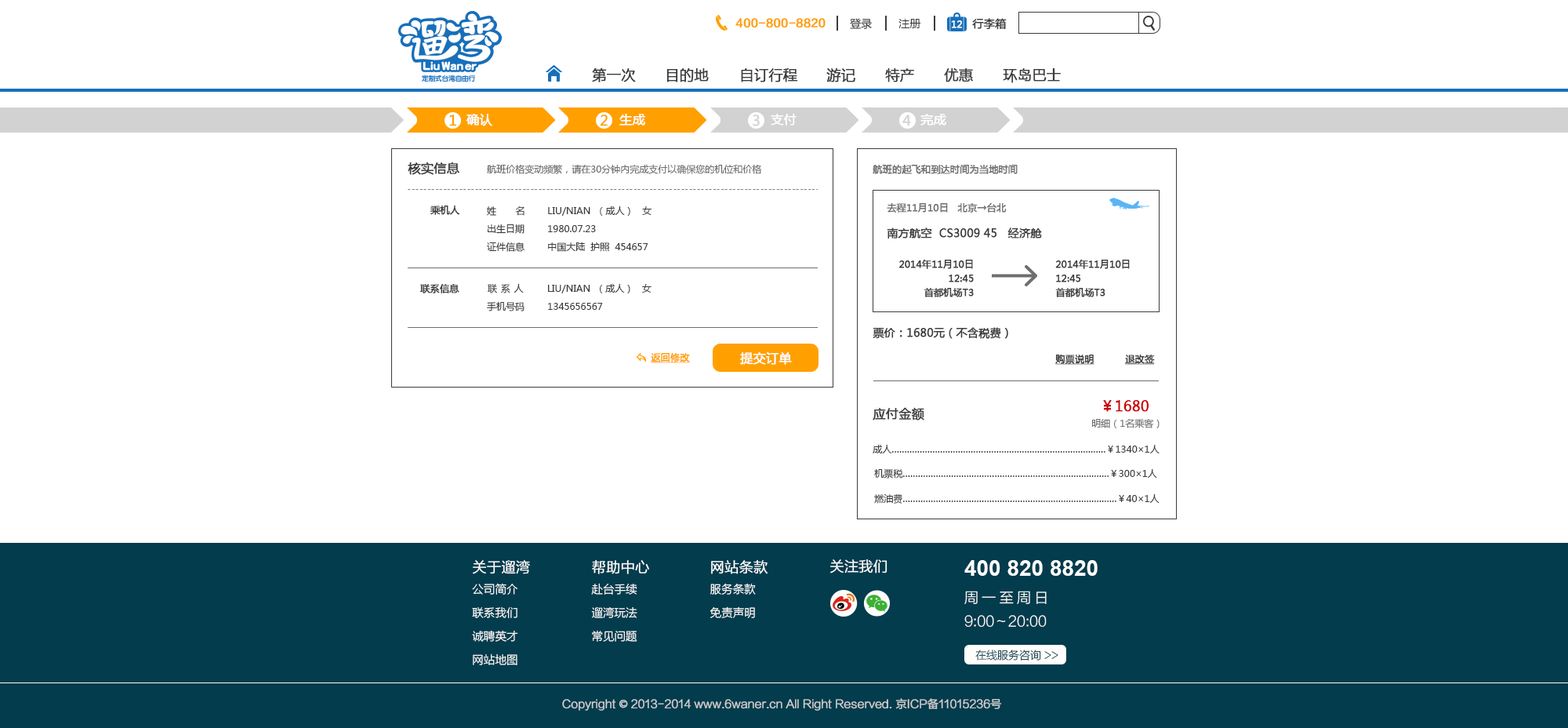
<style>
.page{position:relative;width:1568px;height:728px;background:#ffffff}
.page>*{position:absolute;margin:0}
.t1{font:11px "FZLTZHK--GBK1-0";color:#ffa000;font-weight:bold}
.t2{font:11px "MicrosoftYaHei";color:#3c3c3c}
.t3{font:9.4px "MicrosoftYaHei";color:#fefefe;font-weight:bold}
.t4{font:11px "MicrosoftYaHei";color:#3c3c3c;font-weight:bold}
.t5{font:14.1px "MicrosoftYaHei";color:#3c3c3c;font-weight:bold}
.t6{font:12.5px "MicrosoftYaHei";color:#ffffff;font-weight:bold}
.t7{font:14.1px "MicrosoftYaHei";color:#ffa000;font-weight:bold}
.t8{font:14.1px "MicrosoftYaHei";color:#d2d2d2;font-weight:bold}
.t9{font:12.5px "MicrosoftYaHei";color:#3c3c3c;font-weight:bold}
.t10{font:9.4px "MicrosoftYaHei";color:#6e6e6e}
.t11{font:9.4px "MicrosoftYaHei";color:#6e6e6e;font-weight:bold}
.t12{font:9.4px "MicrosoftYaHei";color:#3c3c3c;font-weight:bold}
.t13{font:9.4px "MicrosoftYaHei";color:#3c3c3c}
.t14{font:9.4px/14.1px "MicrosoftYaHei";color:#3c3c3c;font-weight:bold}
.t15{font:9.4px "MicrosoftYaHei";letter-spacing:0.05em;color:#3c3c3c}
.t16{font:9.4px "MicrosoftYaHei";color:#ffa000;font-weight:bold;text-decoration:underline}
.t17{font:9.4px "MicrosoftYaHei";color:#3c3c3c;font-weight:bold;text-decoration:underline}
.t18{font:14.1px "MicrosoftYaHei";color:#cc0000;font-weight:bold}
.t19{font:11.4px/23.5px "FZLTXHK--GBK1-0";color:#ffffff}
.t20{font:14.1px/23.5px "FZLTXHK--GBK1-0";color:#ffffff;font-weight:bold}
.t21{font:14.1px "FZLTXHK--GBK1-0";color:#ffffff;font-weight:bold}
.t22{font:22px "Arial-BoldMT";color:#ffffff}
.t23{font:14.1px/23.5px "FZLTXHK--GBK1-0";color:#ffffff}
.t24{font:14.1px/23.5px "FZLTXHK--GBK1-0";letter-spacing:0.24em;color:#ffffff}
.t25{font:11px "FZLTXHK--GBK1-0"}
.t26{font:11px "FZLTXHK--GBK1-0";color:#d0d0d0;font-weight:bold}
.t27{font:11px "AdobeHeitiStd-Regular";color:#d0d0d0;font-weight:bold}
</style>
<div class="page">
<p class="t1" style="left:735px;top:18px;width:91px;height:10px">400-800-8820</p>
<p class="t2" style="left:850px;top:18px;width:22px;height:11px">登录</p>
<p class="t2" style="left:898px;top:19px;width:23px;height:9px">注册</p>
<p class="t3" style="left:951px;top:20px;width:11px;height:8px">12</p>
<p class="t4" style="left:972px;top:18px;width:35px;height:12px">行李箱</p>
<p class="t5" style="left:592px;top:67px;width:44px;height:15px">第一次</p>
<p class="t5" style="left:666px;top:68px;width:43px;height:14px">目的地</p>
<p class="t5" style="left:741px;top:68px;width:57px;height:14px">自订行程</p>
<p class="t5" style="left:826px;top:68px;width:29px;height:14px">游记</p>
<p class="t5" style="left:885px;top:68px;width:29px;height:14px">特产</p>
<p class="t5" style="left:944px;top:68px;width:29px;height:14px">优惠</p>
<p class="t5" style="left:1003px;top:68px;width:58px;height:15px">环岛巴士</p>
<p class="t6" style="left:466px;top:114px;width:26px;height:12px">确认</p>
<p class="t6" style="left:619px;top:114px;width:26px;height:11px">生成</p>
<p class="t6" style="left:771px;top:114px;width:26px;height:11px">支付</p>
<p class="t6" style="left:920px;top:114px;width:26px;height:11px">完成</p>
<p class="t7" style="left:449px;top:114px;width:7px;height:12px">1</p>
<p class="t7" style="left:601px;top:114px;width:7px;height:12px">2</p>
<p class="t8" style="left:753px;top:114px;width:7px;height:12px">3</p>
<p class="t8" style="left:902px;top:114px;width:9px;height:12px">4</p>
<p class="t9" style="left:408px;top:162px;width:51px;height:13px">核实信息</p>
<p class="t10" style="left:487px;top:164px;width:274px;height:10px">航班价格变动频繁，请在30分钟内完成支付以确保您的机位和价格</p>
<p class="t11" style="left:873px;top:164px;width:145px;height:10px">航班的起飞和到达时间为当地时间</p>
<p class="t12" style="left:430px;top:205px;width:30px;height:10px">乘机人</p>
<p class="t13" style="left:486px;top:206px;width:166px;height:10px">姓       名        LIU/NIAN  （成人）   女</p>
<p class="t11" style="left:887px;top:202px;width:120px;height:10px">去程11月10日   北京→台北</p>
<p class="t13" style="left:488px;top:223px;width:108px;height:11px">出生日期        1980.07.23</p>
<p class="t4" style="left:887px;top:227px;width:155px;height:12px">南方航空  CS3009 45   经济舱</p>
<p class="t13" style="left:487px;top:242px;width:161px;height:10px">证件信息         中国大陆  护照  454657</p>
<p class="t14" style="left:899px;top:259px;width:75px;height:38px;text-align:right">2014年11月10日<br>12:45<br>首都机场T3</p>
<p class="t14" style="left:1055px;top:259px;width:75px;height:38px">2014年11月10日<br>12:45<br>首都机场T3</p>
<p class="t12" style="left:420px;top:284px;width:39px;height:9px">联系信息</p>
<p class="t13" style="left:487px;top:284px;width:165px;height:9px"><span class="t15">联 系 人         </span>LIU/NIAN  （成人）   女</p>
<p class="t13" style="left:487px;top:302px;width:116px;height:9px">手机号码        1345656567</p>
<p class="t4" style="left:873px;top:327px;width:135px;height:12px">票价：1680元（不含税费）</p>
<p class="t16" style="left:651px;top:352px;width:39px;height:11px">返回修改</p>
<p class="t6" style="left:740px;top:351px;width:52px;height:14px">提交订单</p>
<p class="t17" style="left:1055px;top:354px;width:39px;height:11px">购票说明</p>
<p class="t17" style="left:1125px;top:354px;width:30px;height:11px">退改签</p>
<p class="t18" style="left:1103px;top:400px;width:46px;height:12px">￥1680</p>
<p class="t9" style="left:873px;top:407px;width:51px;height:13px">应付金额</p>
<p class="t10" style="left:1092px;top:419px;width:68px;height:9px">明细（1名乘客）</p>
<p class="t13" style="left:873px;top:445px;width:287px;height:8px">成人…………………………………………………………………………￥1340×1人</p>
<p class="t13" style="left:874px;top:469px;width:283px;height:9px">机票税………………………………………………………………………￥300×1人</p>
<p class="t13" style="left:874px;top:493px;width:286px;height:10px">燃油费…………………………………………………………………………￥40×1人</p>
<p class="t19" style="left:472px;top:560px;width:58px;height:105px"><span class="t20">关于遛湾<br></span>公司简介<br>联系我们<br>诚聘英才<br>网站地图</p>
<p class="t19" style="left:591px;top:559px;width:58px;height:82px"><span class="t20">帮助中心<br></span>赴台手续 <br>遛湾玩法 <br>常见问题</p>
<p class="t19" style="left:710px;top:560px;width:58px;height:58px"><span class="t20">网站条款 <br></span>服务条款<br>免责声明</p>
<p class="t21" style="left:830px;top:559px;width:57px;height:14px">关注我们</p>
<p class="t22" style="left:964px;top:560px;width:134px;height:15px">400 820 8820</p>
<p class="t23" style="left:964px;top:590px;width:83px;height:36px"><span class="t24">周一至周日<br></span>9:00～20:00</p>
<p class="t25" style="left:975px;top:649px;width:83px;height:11px">在线服务咨询 &gt;&gt;</p>
<p class="t26" style="left:562px;top:698px;width:440px;height:12px">Copyright <span class="t27">©</span> 2013-2014 www.6waner.cn All Right Reserved. 京ICP备11015236号</p>
</div>
